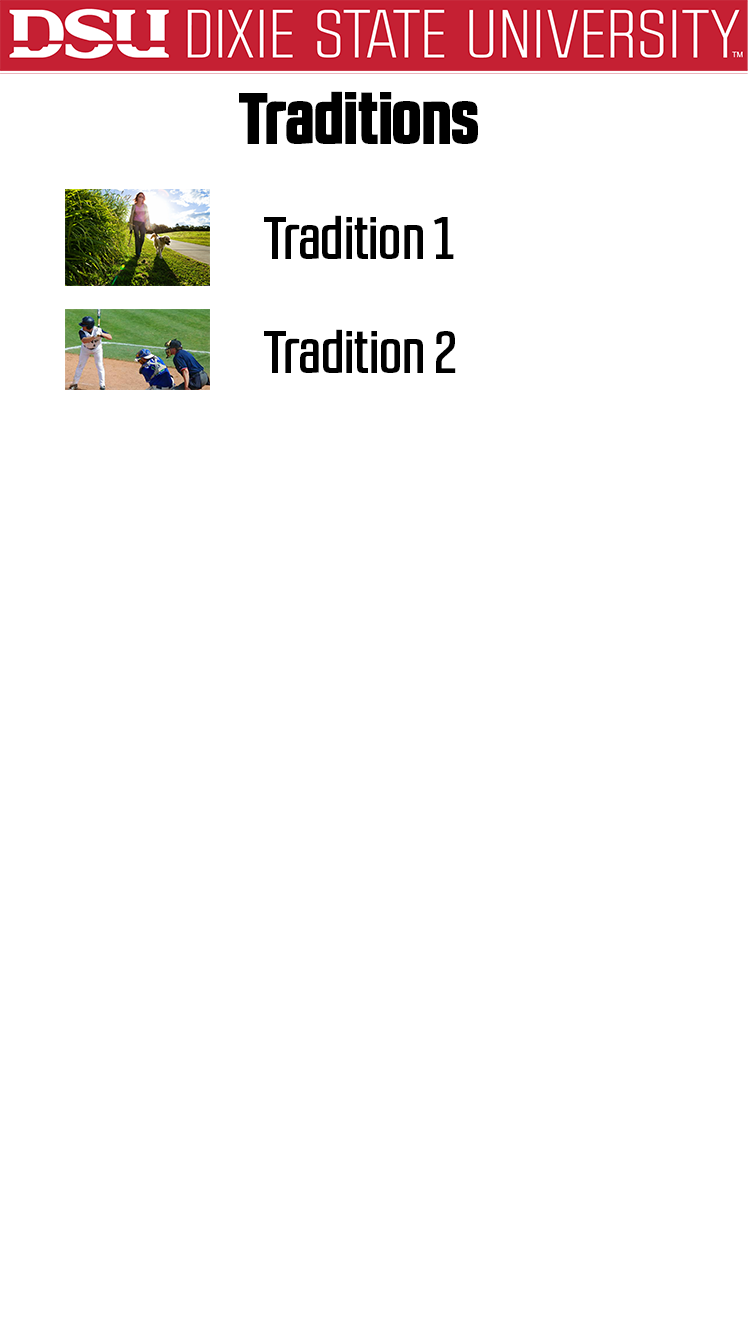
<style>
.page{position:relative;width:750px;height:1334px;background:#ffffff}
.page>*{position:absolute;margin:0}
.t1{font:72px "RBNo2.1a-Black";color:#000000}
.t2{font:60px "RBNo2.1a-Medium";color:#000000}
</style>
<div class="page">
<p class="t1" style="left:239px;top:91px;width:239px;height:53px">Traditions</p>
<p class="t2" style="left:264px;top:215px;width:190px;height:44px">Tradition 1</p>
<p class="t2" style="left:264px;top:329px;width:192px;height:44px">Tradition 2</p>
</div>
